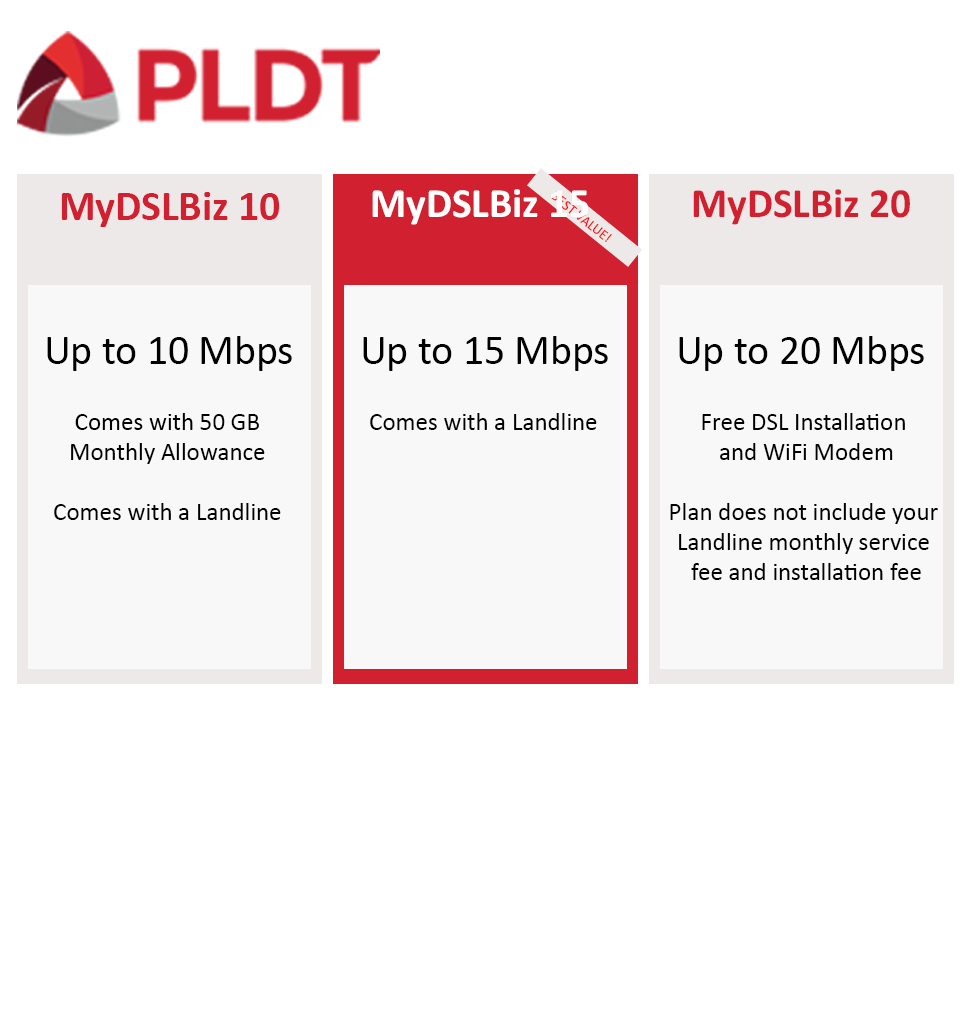
<style>
.page{position:relative;width:960px;height:1024px;background:#ffffff}
.page>*{position:absolute;margin:0}
.t1{font:41.7px "Calibri-Bold";color:#d12030}
.t2{font:41.8px "Calibri-Bold";color:#ffffff}
.t3{font:14.2px "Calibri"}
.t4{font:41.8px "Calibri-Bold";color:#d12030}
.t5{font:41.7px "Calibri";color:#000000}
.t6{font:25px "Calibri";color:#000000}
</style>
<div class="page">
<p class="t1" style="left:61px;top:192px;width:219px;height:35px">MyDSLBiz 10</p>
<p class="t2" style="left:372px;top:189px;width:217px;height:36px">MyDSLBiz 15</p>
<p class="t3" style="left:551px;top:190px;width:61px;height:52px;rotate:39deg">BEST VALUE!</p>
<p class="t4" style="left:693px;top:189px;width:217px;height:36px">MyDSLBiz 20</p>
<p class="t5" style="left:47px;top:336px;width:245px;height:35px">Up to 10 Mbps</p>
<p class="t5" style="left:363px;top:336px;width:245px;height:35px">Up to 15 Mbps</p>
<p class="t5" style="left:679px;top:336px;width:245px;height:35px">Up to 20 Mbps</p>
<p class="t6" style="left:54px;top:413px;width:227px;height:107px;text-align:center">Comes with 50 GB<br>Monthly Allowance<br><br>Comes with a Landline</p>
<p class="t6" style="left:370px;top:413px;width:227px;height:17px">Comes with a Landline</p>
<p class="t6" style="left:670px;top:413px;width:268px;height:167px;text-align:center">Free DSL Installation <br>and WiFi Modem<br><br>Plan does not include your <br>Landline monthly service <br>fee and installation fee</p>
</div>
